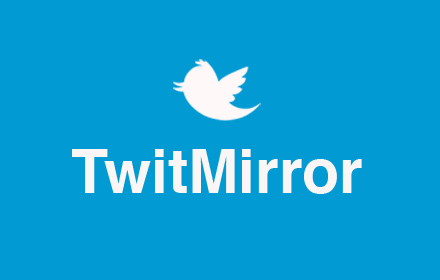
<style>
.page{position:relative;width:440px;height:280px;background:#029ad3}
.page>*{position:absolute;margin:0}
.t1{font:60.6px "Helvetica-Bold";color:#faf6f6}
</style>
<div class="page">
<p class="t1" style="left:72px;top:149px;width:290px;height:45px">TwitMirror</p>
</div>
